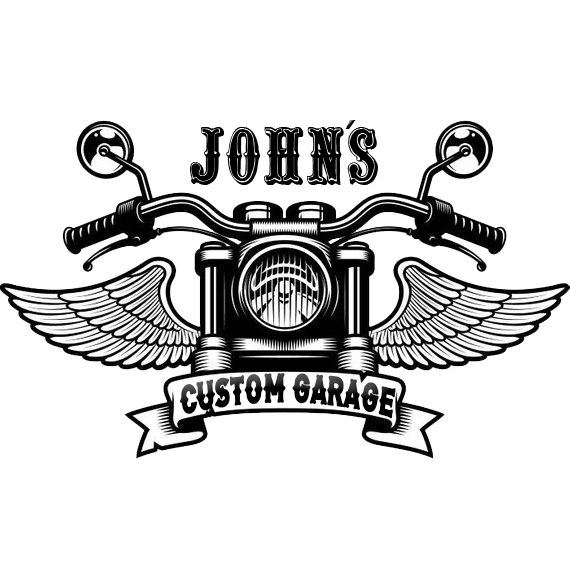
<style>
.page{position:relative;width:570px;height:580px;background:#ffffff}
.page>*{position:absolute;margin:0}
.t1{font:48px "Verdana";color:#000000}
.t2{font:57.9px "QuentinCaps";color:#000000;scale:1.07 1}
.t3{font:36.9px "FreeBiker";color:#000000;scale:0.65 1}
</style>
<div class="page">
<p class="t1" style="left:345px;top:120px;width:11px;height:9px">´</p>
<p class="t2" style="left:190px;top:127px;width:188px;height:58px">JOHNS</p>
<p class="t3" style="left:179px;top:373px;width:217px;height:46px;rotate:1deg">CUSTOM GARAGE</p>
</div>
